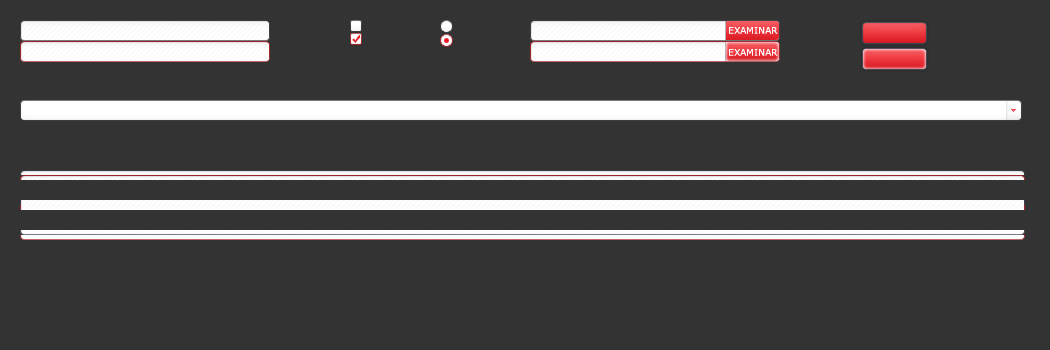
<style>
.page{position:relative;width:1050px;height:350px;background:#333333}
.page>*{position:absolute;margin:0}
.t1{font:9px "Verdana";color:#ffffff;text-transform:uppercase}
</style>
<div class="page">
<p class="t1" style="left:729px;top:27px;width:49px;height:7px">EXAMINAR</p>
<p class="t1" style="left:729px;top:49px;width:49px;height:7px">EXAMINAR</p>
</div>
